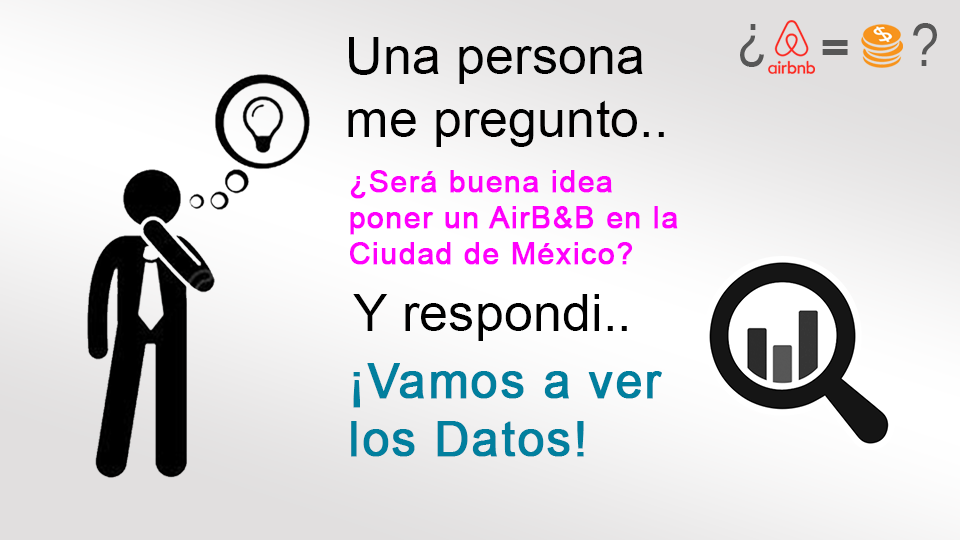
<style>
.page{position:relative;width:960px;height:540px}
.page>*{position:absolute;margin:0}
.t1{font:61px "LiberationSansNarrow";color:#575757}
.t2{font:52.4px "ArialMT";color:#000000}
.t3{font:53.1px "Impact";color:#575757}
.t4{font:30px "ArialMT";letter-spacing:0.03em;color:#ff00fc;font-weight:bold}
.t5{font:48px "ArialMT";letter-spacing:0.03em;color:#017f9e;font-weight:bold}
</style>
<div class="page">
<p class="t1" style="left:740px;top:24px;width:24px;height:43px;rotate:180deg">?</p>
<p class="t1" style="left:913px;top:23px;width:24px;height:43px">?</p>
<p class="t2" style="left:348px;top:37px;width:316px;height:110px">Una persona<br>me pregunto..</p>
<p class="t3" style="left:822px;top:40px;width:26px;height:15px">=</p>
<p class="t4" style="left:350px;top:170px;width:328px;height:95px">¿Será buena idea poner un AirB&amp;B en la Ciudad de México?</p>
<p class="t2" style="left:353px;top:294px;width:274px;height:47px">Y respondi..</p>
<p class="t5" style="left:351px;top:363px;width:311px;height:94px">¡Vamos a ver los Datos!</p>
</div>
